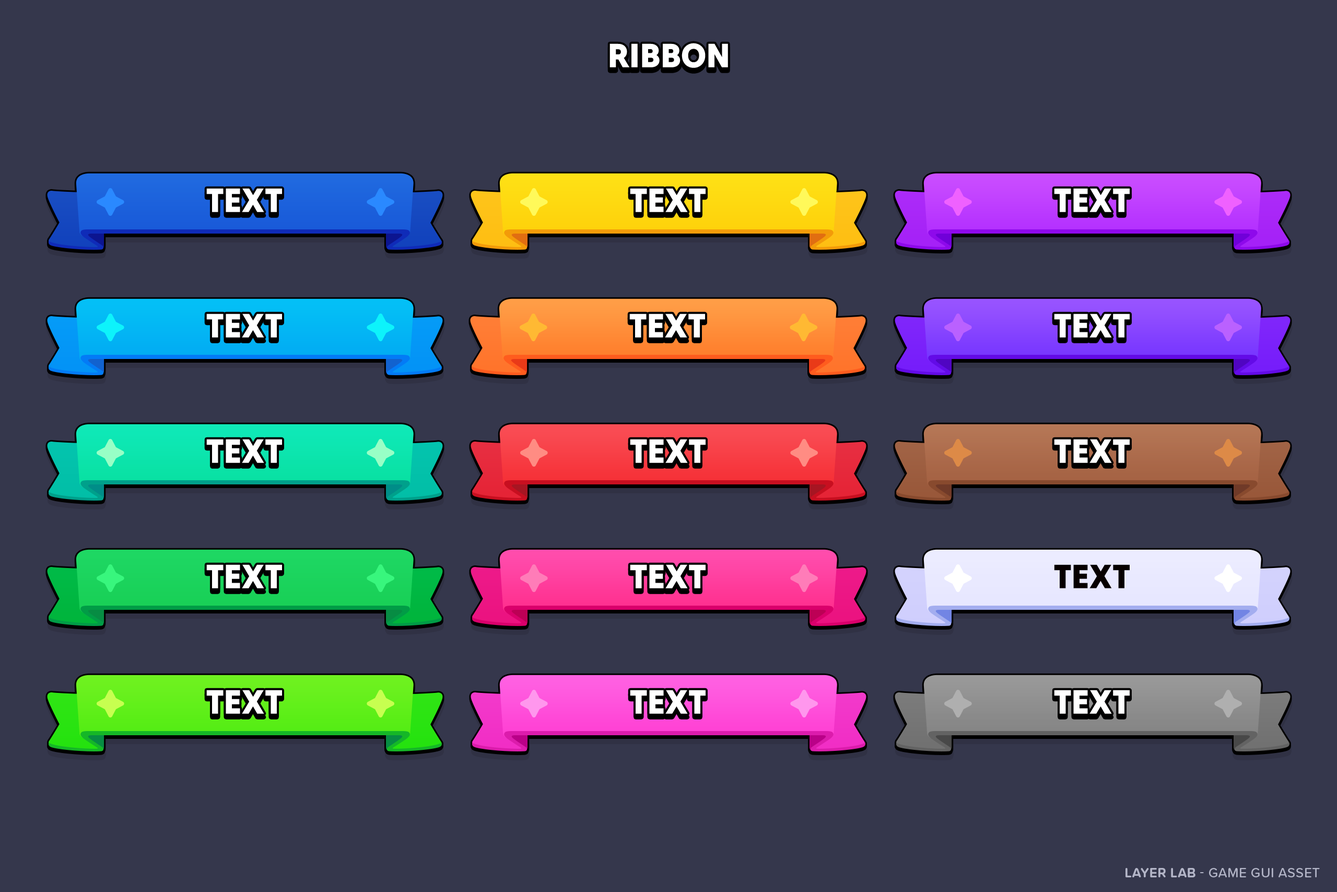
<style>
.page{position:relative;width:1337px;height:892px;background:#35374c}
.page>*{position:absolute;margin:0}
.t1{font:34.5px "TiltWarp-Regular";color:#ffffff;text-transform:uppercase}
.t2{font:34.5px "TiltWarp-Regular";color:#070000;text-transform:uppercase}
</style>
<div class="page">
<p class="t1" style="left:610px;top:43px;width:118px;height:25px">Ribbon</p>
<p class="t1" style="left:206px;top:188px;width:76px;height:24px">text</p>
<p class="t1" style="left:630px;top:188px;width:76px;height:24px">text</p>
<p class="t1" style="left:1054px;top:188px;width:76px;height:24px">text</p>
<p class="t1" style="left:206px;top:313px;width:76px;height:24px">text</p>
<p class="t1" style="left:629px;top:313px;width:76px;height:24px">text</p>
<p class="t1" style="left:1054px;top:313px;width:76px;height:24px">text</p>
<p class="t1" style="left:206px;top:439px;width:76px;height:24px">text</p>
<p class="t1" style="left:630px;top:439px;width:76px;height:24px">text</p>
<p class="t1" style="left:1054px;top:439px;width:76px;height:24px">text</p>
<p class="t1" style="left:206px;top:564px;width:76px;height:24px">text</p>
<p class="t1" style="left:630px;top:564px;width:76px;height:24px">text</p>
<p class="t2" style="left:1054px;top:564px;width:76px;height:24px">text</p>
<p class="t1" style="left:206px;top:690px;width:76px;height:24px">text</p>
<p class="t1" style="left:630px;top:690px;width:76px;height:24px">text</p>
<p class="t1" style="left:1054px;top:690px;width:76px;height:24px">text</p>
</div>
